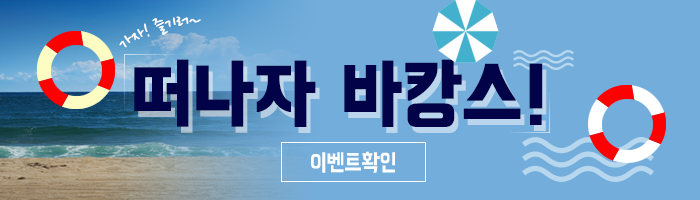
<style>
.page{position:relative;width:700px;height:200px;background:#73addb}
.page>*{position:absolute;margin:0}
.t1{font:19.9px "NanumPen";letter-spacing:-0.02em;color:#ffffff}
.t2{font:78.8px "BMHANNAPro";letter-spacing:-0.02em;color:#020248;font-weight:bold;scale:0.91 1}
.t3{font:24.2px "BMHANNAPro";letter-spacing:-0.02em;color:#ffffff;scale:0.87 1}
</style>
<div class="page">
<p class="t1" style="left:119px;top:16px;width:82px;height:32px;rotate:-18deg">가자! 즐기러~</p>
<p class="t2" style="left:134px;top:59px;width:409px;height:68px">떠나자 바캉스!</p>
<p class="t3" style="left:311px;top:151px;width:84px;height:22px">이벤트확인</p>
</div>
